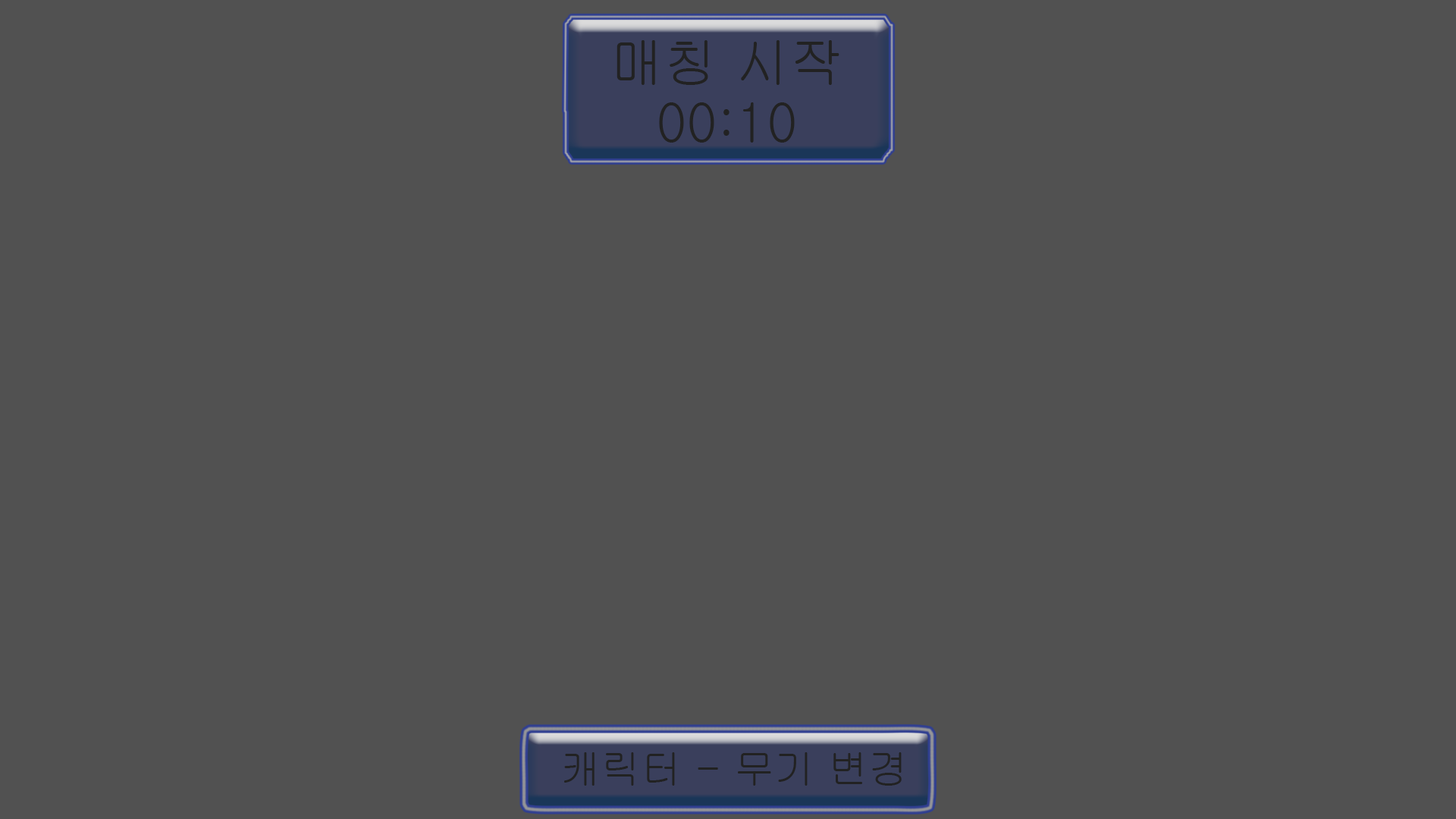
<style>
.page{position:relative;width:1456px;height:819px;background:#515151}
.page>*{position:absolute;margin:0}
.t1{font:53.9px "Gulim";color:#222222}
.t2{font:40.4px "Gulim";color:#222222}
</style>
<div class="page">
<p class="t1" style="left:617px;top:40px;width:222px;height:45px">매칭 시작</p>
<p class="t1" style="left:659px;top:102px;width:136px;height:41px">00:10</p>
<p class="t2" style="left:564px;top:752px;width:338px;height:34px">캐릭터 - 무기 변경</p>
</div>
